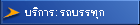
<style>
.page{position:relative;width:140px;height:25px}
.page>*{position:absolute;margin:0}
.t1{font:15.3px "EucrosiaDSE";color:#ffffff;scale:1.12 1}
</style>
<div class="page">
<p class="t1" style="left:25px;top:7px;width:79px;height:12px">ºÃÔ¡ÒÃ:Ã¶ºÃÃ·Ø¡</p>
</div>
